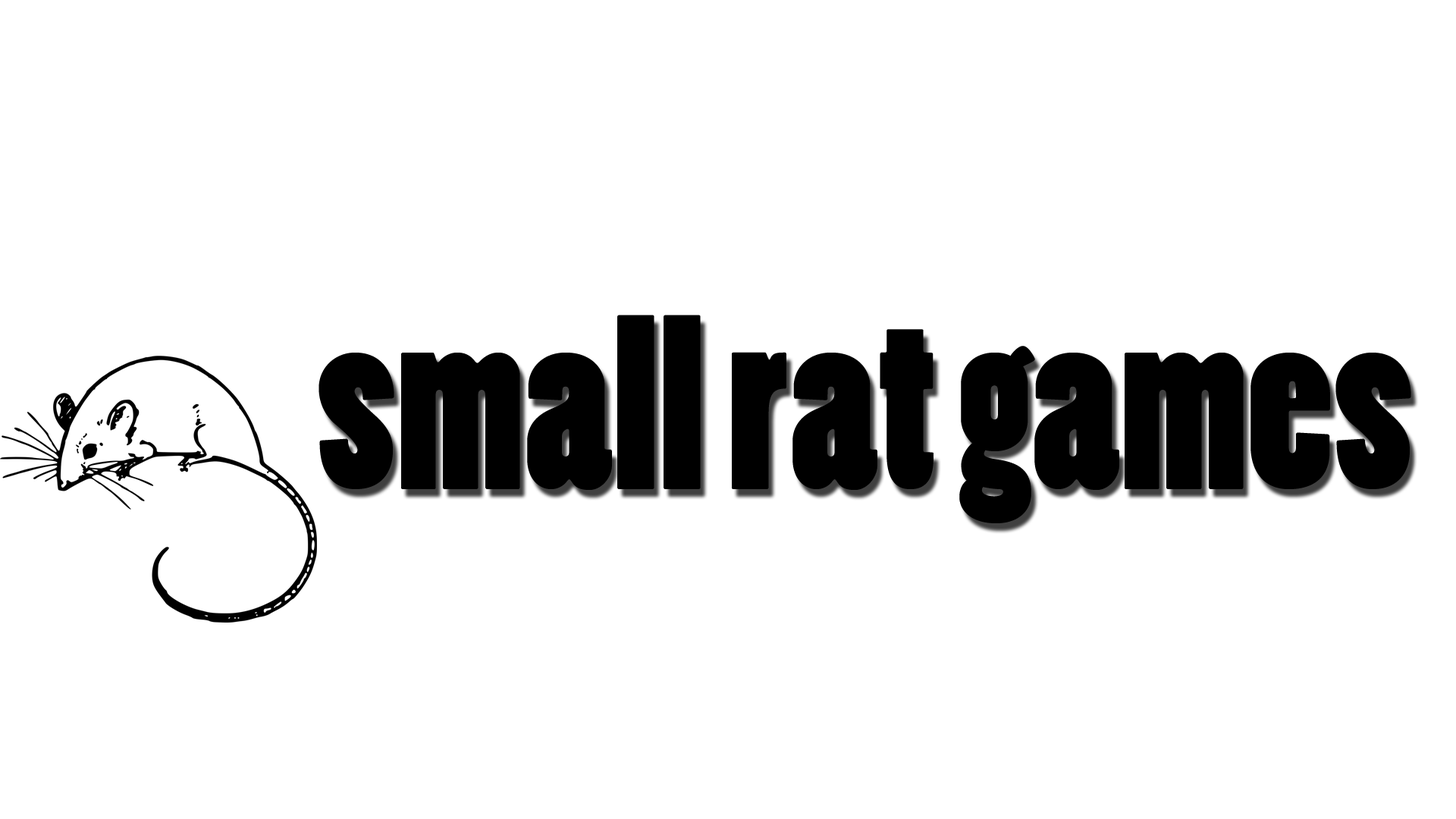
<style>
.page{position:relative;width:1456px;height:819px;background:#ffffff}
.page>*{position:absolute;margin:0}
.t1{font:227.5px "PoplarStd";color:#000000}
</style>
<div class="page">
<p class="t1" style="left:318px;top:315px;width:1093px;height:208px">small rat games</p>
</div>
